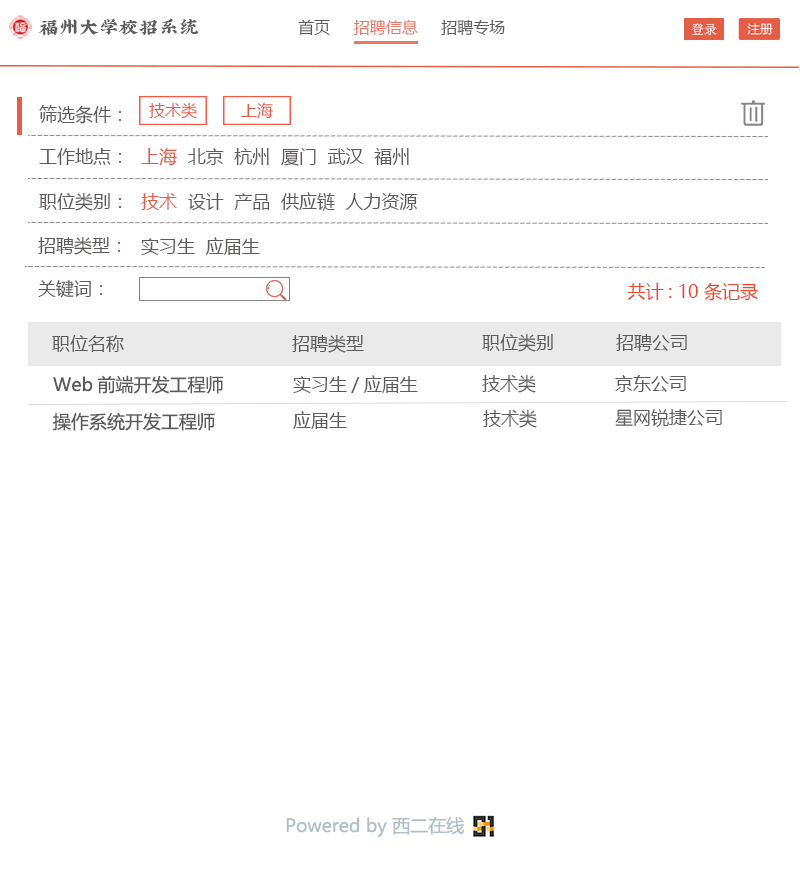
<style>
.page{position:relative;width:800px;height:888px;background:#ffffff}
.page>*{position:absolute;margin:0}
.t1{font:20px "XiQuezhaopaiti-Regular";color:#5d5b5b}
.t2{font:16px "MicrosoftYaHei";color:#e87764}
.t3{font:16px "MicrosoftYaHei";color:#5d5b5b}
.t4{font:16px "MicrosoftYaHei";color:#e45d47}
.t5{font:18px "MicrosoftYaHei";color:#5f5a59}
.t6{font:18px "MicrosoftYaHei";color:#e45d47}
.t7{font:18px "MicrosoftYaHei";color:#f0482c}
.t8{font:18px "MicrosoftYaHei";color:#5d5b5b}
.t9{font:18px "MicrosoftYaHei";color:#b0bec7}
</style>
<div class="page">
<p class="t1" style="left:39px;top:18px;width:160px;height:18px">福州大学校招系统</p>
<p class="t2" style="left:298px;top:19px;width:207px;height:17px"><span class="t3">首页     </span>招聘信息 <span class="t3">    招聘专场</span></p>
<p class="t4" style="left:149px;top:102px;width:48px;height:17px">技术类</p>
<p class="t4" style="left:241px;top:102px;width:32px;height:17px">上海</p>
<p class="t5" style="left:39px;top:105px;width:83px;height:19px">筛选条件：</p>
<p class="t5" style="left:39px;top:148px;width:83px;height:17px">工作地点：</p>
<p class="t5" style="left:141px;top:148px;width:268px;height:18px"><span class="t6">上海</span>  北京  杭州  厦门  武汉  福州</p>
<p class="t5" style="left:39px;top:193px;width:83px;height:18px">职位类别：</p>
<p class="t5" style="left:141px;top:192px;width:277px;height:19px"><span class="t6">技术</span>  设计  产品  供应链  人力资源</p>
<p class="t5" style="left:38px;top:237px;width:83px;height:18px">招聘类型：</p>
<p class="t5" style="left:141px;top:237px;width:119px;height:18px">实习生  应届生</p>
<p class="t5" style="left:38px;top:280px;width:65px;height:18px">关键词：</p>
<p class="t7" style="left:627px;top:282px;width:131px;height:19px">共计: 10 条记录</p>
<p class="t8" style="left:52px;top:335px;width:72px;height:17px">职位名称</p>
<p class="t8" style="left:292px;top:335px;width:72px;height:18px">招聘类型</p>
<p class="t8" style="left:482px;top:334px;width:71px;height:18px">职位类别</p>
<p class="t8" style="left:616px;top:334px;width:71px;height:17px">招聘公司</p>
<p class="t8" style="left:53px;top:375px;width:171px;height:19px">Web前端开发工程师</p>
<p class="t8" style="left:293px;top:375px;width:125px;height:18px">实习生/应届生</p>
<p class="t8" style="left:482px;top:375px;width:54px;height:18px">技术类</p>
<p class="t8" style="left:615px;top:375px;width:71px;height:17px">京东公司</p>
<p class="t8" style="left:53px;top:412px;width:162px;height:19px">操作系统开发工程师</p>
<p class="t8" style="left:293px;top:411px;width:54px;height:18px">应届生</p>
<p class="t8" style="left:483px;top:410px;width:54px;height:18px">技术类</p>
<p class="t8" style="left:615px;top:409px;width:107px;height:18px">星网锐捷公司</p>
<p class="t9" style="left:286px;top:816px;width:178px;height:21px">Powered by 西二在线</p>
</div>
